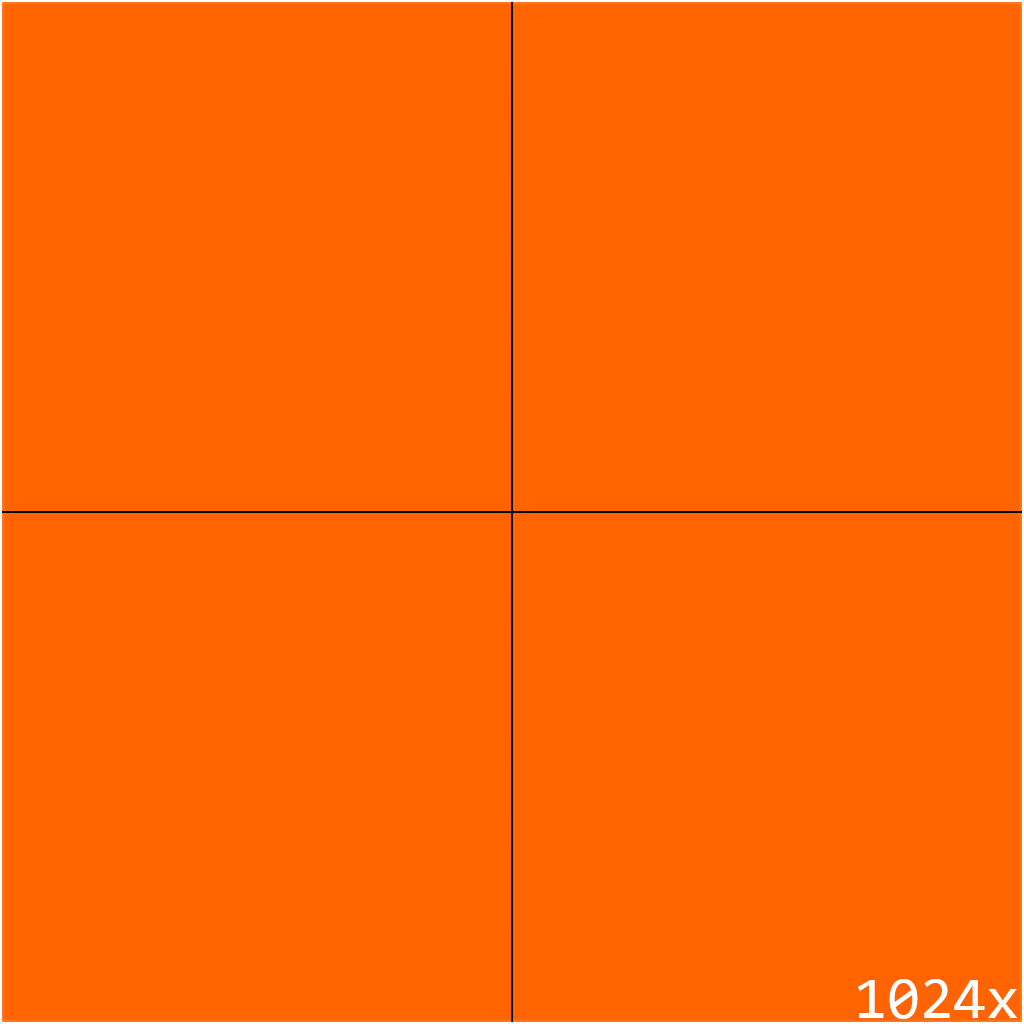
<style>
.page{position:relative;width:1024px;height:1024px;background:#ff6400}
.page>*{position:absolute;margin:0}
.t1{font:60px "Consolas";color:#ffffff}
</style>
<div class="page">
<p class="t1" style="left:858px;top:979px;width:159px;height:40px">1024x</p>
</div>
